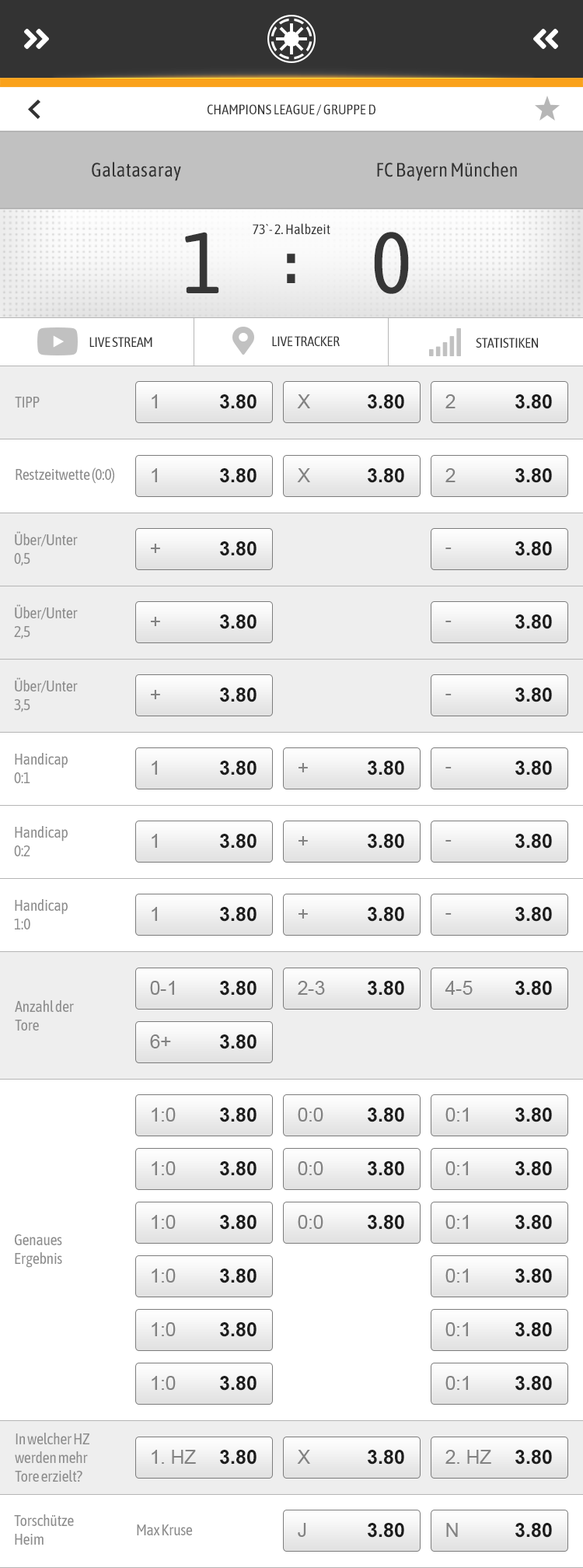
<style>
.page{position:relative;width:583px;height:1568px;background:#ffffff}
.page>*{position:absolute;margin:0}
.t1{font:14px "AsapCondensed-Regular";color:#333333}
.t2{font:19.4px "AsapCondensed-Regular";color:#333333}
.t3{font:86.6px "AsapCondensed-Regular";letter-spacing:-0.025em;color:#363636}
.t4{font:14px "AsapCondensed-Regular";letter-spacing:-0.025em;color:#333333}
.t5{font:15.6px "AsapCondensed-Regular";letter-spacing:-0.025em;color:#8c8c8c}
.t6{font:19.4px "ArialMT";color:#828282}
.t7{font:19.4px "Arial-BoldMT";letter-spacing:0.025em;color:#1c1c1c}
</style>
<div class="page">
<p class="t1" style="left:208px;top:104px;width:168px;height:12px">CHAMPIONS LEAGUE / GRUPPE D</p>
<p class="t2" style="left:92px;top:162px;width:89px;height:19px">Galatasaray</p>
<p class="t2" style="left:377px;top:162px;width:140px;height:19px">FC Bayern München</p>
<p class="t3" style="left:185px;top:232px;width:34px;height:61px">1</p>
<p class="t1" style="left:253px;top:223px;width:78px;height:11px">73`- 2. Halbzeit</p>
<p class="t3" style="left:374px;top:232px;width:35px;height:62px">0</p>
<p class="t4" style="left:89px;top:337px;width:63px;height:10px">LIVE STREAM</p>
<p class="t4" style="left:272px;top:336px;width:68px;height:10px">LIVE TRACKER</p>
<p class="t4" style="left:476px;top:338px;width:62px;height:10px">STATISTIKEN</p>
<p class="t5" style="left:15px;top:397px;width:25px;height:11px">TIPP</p>
<p class="t6" style="left:152px;top:394px;width:5px;height:14px">1</p>
<p class="t7" style="left:220px;top:394px;width:37px;height:15px">3.80</p>
<p class="t6" style="left:297px;top:394px;width:13px;height:14px">X</p>
<p class="t7" style="left:368px;top:394px;width:36px;height:15px">3.80</p>
<p class="t6" style="left:446px;top:394px;width:10px;height:14px">2</p>
<p class="t7" style="left:516px;top:394px;width:36px;height:15px">3.80</p>
<p class="t5" style="left:16px;top:467px;width:98px;height:17px">Restzeitwette (0:0)</p>
<p class="t6" style="left:152px;top:468px;width:5px;height:14px">1</p>
<p class="t7" style="left:220px;top:468px;width:37px;height:15px">3.80</p>
<p class="t6" style="left:297px;top:468px;width:13px;height:14px">X</p>
<p class="t7" style="left:368px;top:468px;width:36px;height:15px">3.80</p>
<p class="t6" style="left:446px;top:468px;width:10px;height:14px">2</p>
<p class="t7" style="left:516px;top:468px;width:36px;height:15px">3.80</p>
<p class="t5" style="left:14px;top:531px;width:64px;height:35px">Über/Unter<br>0,5</p>
<p class="t6" style="left:151px;top:544px;width:9px;height:9px">+</p>
<p class="t7" style="left:220px;top:541px;width:37px;height:15px">3.80</p>
<p class="t7" style="left:516px;top:541px;width:36px;height:15px">3.80</p>
<p class="t6" style="left:446px;top:548px;width:6px;height:1px">-</p>
<p class="t5" style="left:14px;top:604px;width:64px;height:35px">Über/Unter<br>2,5</p>
<p class="t6" style="left:151px;top:617px;width:9px;height:9px">+</p>
<p class="t7" style="left:220px;top:614px;width:37px;height:15px">3.80</p>
<p class="t7" style="left:516px;top:614px;width:36px;height:15px">3.80</p>
<p class="t6" style="left:446px;top:621px;width:6px;height:1px">-</p>
<p class="t5" style="left:14px;top:677px;width:64px;height:35px">Über/Unter<br>3,5</p>
<p class="t6" style="left:151px;top:690px;width:9px;height:9px">+</p>
<p class="t7" style="left:220px;top:688px;width:37px;height:14px">3.80</p>
<p class="t7" style="left:516px;top:688px;width:36px;height:14px">3.80</p>
<p class="t6" style="left:446px;top:694px;width:6px;height:1px">-</p>
<p class="t5" style="left:14px;top:753px;width:54px;height:30px">Handicap<br>0:1</p>
<p class="t6" style="left:152px;top:761px;width:5px;height:14px">1</p>
<p class="t7" style="left:220px;top:761px;width:37px;height:14px">3.80</p>
<p class="t7" style="left:368px;top:761px;width:36px;height:14px">3.80</p>
<p class="t7" style="left:516px;top:761px;width:36px;height:14px">3.80</p>
<p class="t6" style="left:299px;top:763px;width:9px;height:9px">+</p>
<p class="t6" style="left:446px;top:767px;width:6px;height:1px">-</p>
<p class="t5" style="left:14px;top:826px;width:54px;height:30px">Handicap<br>0:2</p>
<p class="t6" style="left:152px;top:834px;width:5px;height:14px">1</p>
<p class="t7" style="left:220px;top:834px;width:37px;height:15px">3.80</p>
<p class="t7" style="left:368px;top:834px;width:36px;height:15px">3.80</p>
<p class="t7" style="left:516px;top:834px;width:36px;height:15px">3.80</p>
<p class="t6" style="left:299px;top:836px;width:9px;height:9px">+</p>
<p class="t6" style="left:446px;top:840px;width:6px;height:2px">-</p>
<p class="t5" style="left:14px;top:899px;width:54px;height:30px">Handicap<br>1:0</p>
<p class="t6" style="left:152px;top:907px;width:5px;height:14px">1</p>
<p class="t7" style="left:220px;top:907px;width:37px;height:15px">3.80</p>
<p class="t6" style="left:299px;top:909px;width:9px;height:10px">+</p>
<p class="t7" style="left:368px;top:907px;width:36px;height:15px">3.80</p>
<p class="t6" style="left:446px;top:913px;width:6px;height:2px">-</p>
<p class="t7" style="left:516px;top:907px;width:36px;height:15px">3.80</p>
<p class="t6" style="left:150px;top:981px;width:24px;height:14px">0-1</p>
<p class="t7" style="left:220px;top:981px;width:37px;height:15px">3.80</p>
<p class="t6" style="left:298px;top:981px;width:27px;height:14px">2-3</p>
<p class="t7" style="left:368px;top:981px;width:36px;height:15px">3.80</p>
<p class="t6" style="left:445px;top:981px;width:28px;height:14px">4-5</p>
<p class="t7" style="left:516px;top:981px;width:36px;height:15px">3.80</p>
<p class="t5" style="left:15px;top:1000px;width:59px;height:31px">Anzahl der<br>Tore</p>
<p class="t6" style="left:150px;top:1034px;width:21px;height:14px">6+</p>
<p class="t7" style="left:220px;top:1034px;width:37px;height:15px">3.80</p>
<p class="t6" style="left:152px;top:1108px;width:24px;height:14px">1:0</p>
<p class="t7" style="left:220px;top:1108px;width:37px;height:14px">3.80</p>
<p class="t6" style="left:298px;top:1108px;width:26px;height:14px">0:0</p>
<p class="t7" style="left:368px;top:1108px;width:36px;height:14px">3.80</p>
<p class="t6" style="left:446px;top:1108px;width:22px;height:14px">0:1</p>
<p class="t7" style="left:516px;top:1108px;width:36px;height:14px">3.80</p>
<p class="t6" style="left:152px;top:1161px;width:24px;height:14px">1:0</p>
<p class="t7" style="left:220px;top:1161px;width:37px;height:15px">3.80</p>
<p class="t6" style="left:298px;top:1161px;width:26px;height:14px">0:0</p>
<p class="t7" style="left:368px;top:1161px;width:36px;height:15px">3.80</p>
<p class="t6" style="left:446px;top:1161px;width:22px;height:14px">0:1</p>
<p class="t7" style="left:516px;top:1161px;width:36px;height:15px">3.80</p>
<p class="t6" style="left:152px;top:1215px;width:24px;height:14px">1:0</p>
<p class="t7" style="left:220px;top:1215px;width:37px;height:15px">3.80</p>
<p class="t6" style="left:298px;top:1215px;width:26px;height:14px">0:0</p>
<p class="t7" style="left:368px;top:1215px;width:36px;height:15px">3.80</p>
<p class="t6" style="left:446px;top:1215px;width:22px;height:14px">0:1</p>
<p class="t7" style="left:516px;top:1215px;width:36px;height:15px">3.80</p>
<p class="t5" style="left:15px;top:1234px;width:47px;height:34px">Genaues <br>Ergebnis</p>
<p class="t6" style="left:152px;top:1269px;width:24px;height:14px">1:0</p>
<p class="t7" style="left:220px;top:1269px;width:37px;height:14px">3.80</p>
<p class="t6" style="left:446px;top:1269px;width:22px;height:14px">0:1</p>
<p class="t7" style="left:516px;top:1269px;width:36px;height:14px">3.80</p>
<p class="t6" style="left:152px;top:1322px;width:24px;height:14px">1:0</p>
<p class="t7" style="left:220px;top:1322px;width:37px;height:15px">3.80</p>
<p class="t6" style="left:446px;top:1322px;width:22px;height:14px">0:1</p>
<p class="t7" style="left:516px;top:1322px;width:36px;height:15px">3.80</p>
<p class="t6" style="left:152px;top:1376px;width:24px;height:14px">1:0</p>
<p class="t7" style="left:220px;top:1376px;width:37px;height:15px">3.80</p>
<p class="t6" style="left:446px;top:1376px;width:22px;height:14px">0:1</p>
<p class="t7" style="left:516px;top:1376px;width:36px;height:15px">3.80</p>
<p class="t5" style="left:15px;top:1433px;width:74px;height:49px">In welcher HZ <br>werden mehr <br>Tore erzielt?</p>
<p class="t6" style="left:152px;top:1450px;width:44px;height:14px">1. HZ</p>
<p class="t7" style="left:220px;top:1450px;width:37px;height:15px">3.80</p>
<p class="t6" style="left:297px;top:1450px;width:13px;height:14px">X</p>
<p class="t7" style="left:368px;top:1450px;width:36px;height:15px">3.80</p>
<p class="t6" style="left:446px;top:1450px;width:46px;height:14px">2. HZ</p>
<p class="t7" style="left:516px;top:1450px;width:36px;height:15px">3.80</p>
<p class="t5" style="left:14px;top:1514px;width:60px;height:31px">Torschütze <br>Heim</p>
<p class="t5" style="left:137px;top:1524px;width:56px;height:11px">Max Kruse</p>
<p class="t6" style="left:298px;top:1523px;width:8px;height:14px">J</p>
<p class="t7" style="left:368px;top:1523px;width:36px;height:15px">3.80</p>
<p class="t6" style="left:446px;top:1523px;width:12px;height:14px">N</p>
<p class="t7" style="left:516px;top:1523px;width:36px;height:15px">3.80</p>
</div>
